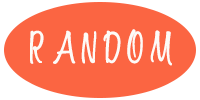
<style>
.page{position:relative;width:200px;height:100px;background:#fb6542}
.page>*{position:absolute;margin:0}
.t1{font:39px "VarianeScript";letter-spacing:0.235em;color:#fdfbf7;scale:0.8 1}
</style>
<div class="page">
<p class="t1" style="left:30px;top:29px;width:142px;height:37px">RANDOM</p>
</div>
